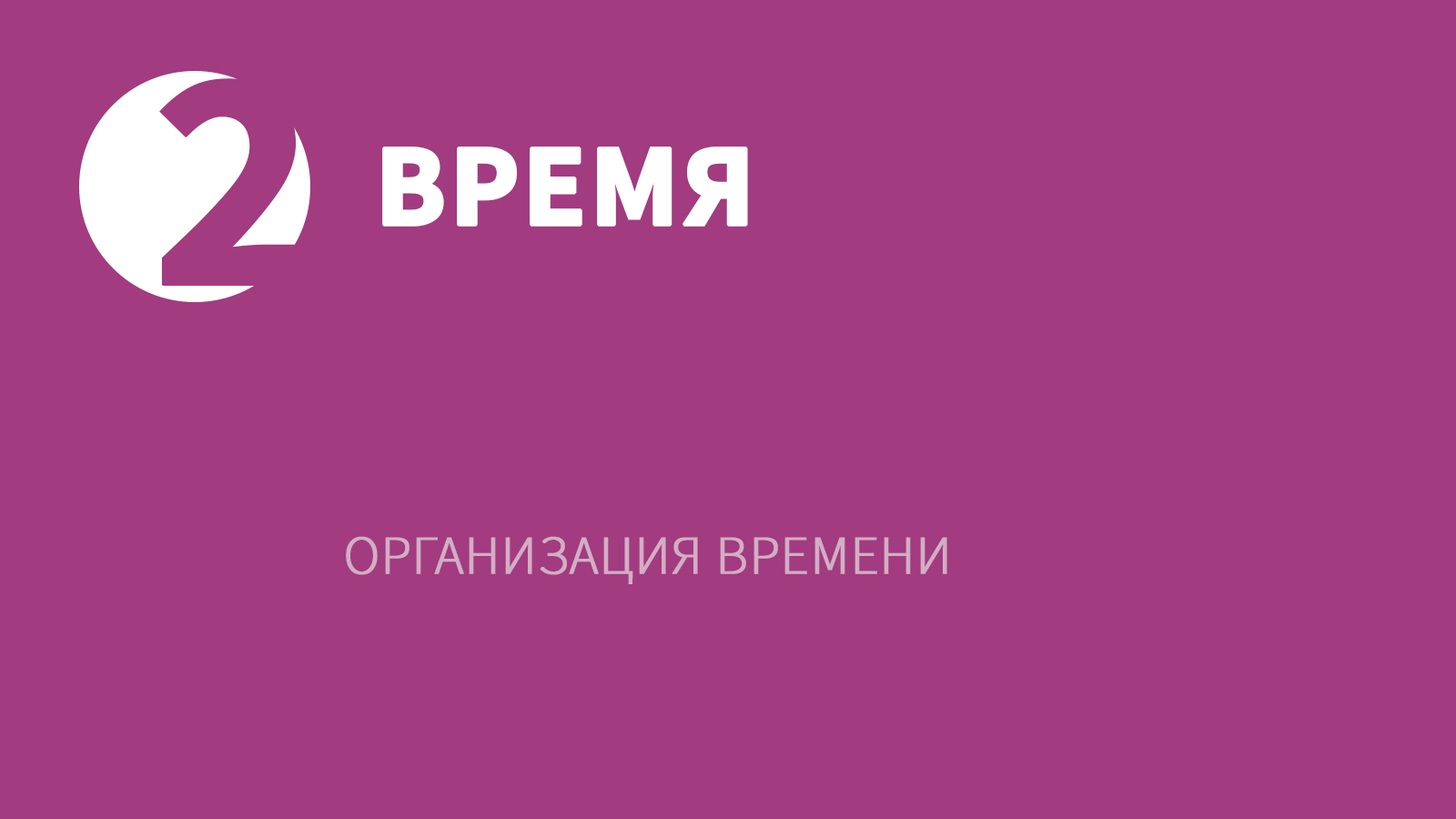
<style>
.page{position:relative;width:1456px;height:819px;background:#a23b80}
.page>*{position:absolute;margin:0}
.t1{font:317.8px "SourceSansPro-Bold";color:#a23b80;text-transform:uppercase;font-weight:bold}
.t2{font:117.4px "SourceSansPro-Bold";color:#ffffff;text-transform:uppercase;font-weight:bold}
.t3{font:54.6px "SourceSansPro-Light";color:#d3adc5;text-transform:uppercase;font-weight:bold}
</style>
<div class="page">
<p class="t1" style="left:159px;top:78px;width:147px;height:208px">2</p>
<p class="t2" style="left:382px;top:147px;width:366px;height:80px">время</p>
<p class="t3" style="left:346px;top:536px;width:601px;height:48px">организация времени</p>
</div>
